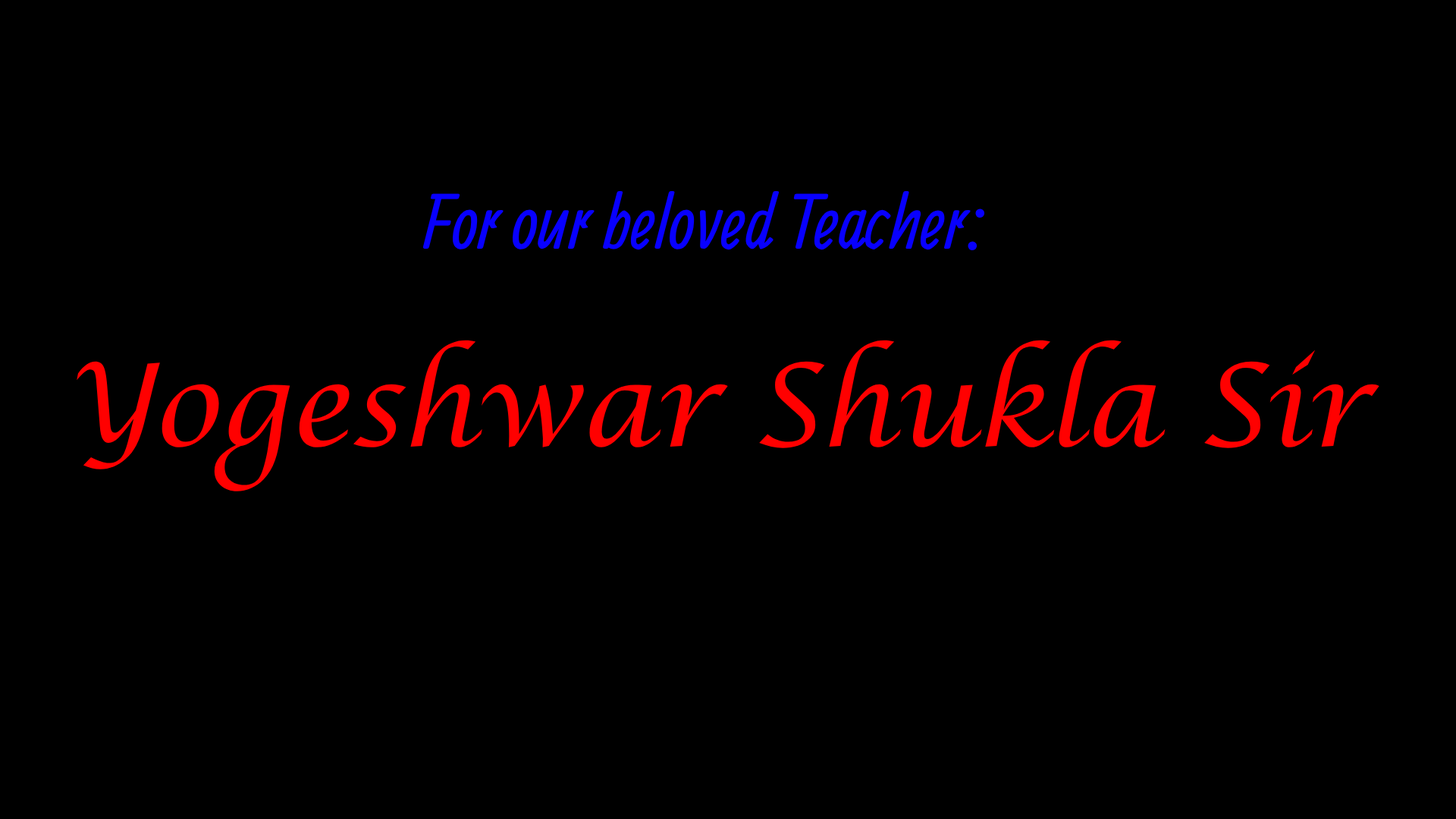
<style>
.page{position:relative;width:1456px;height:819px;background:#000000}
.page>*{position:absolute;margin:0}
.t1{font:75.8px/197.2px "Allan-Regular";color:#0800ff}
.t2{font:113.7px/197.2px "LucidaCalligraphy-Regular";color:#ff0000}
</style>
<div class="page">
<p class="t1" style="left:77px;top:191px;width:1302px;height:300px;text-align:center">For our beloved Teacher: <br><span class="t2">Yogeshwar Shukla Sir</span></p>
</div>
